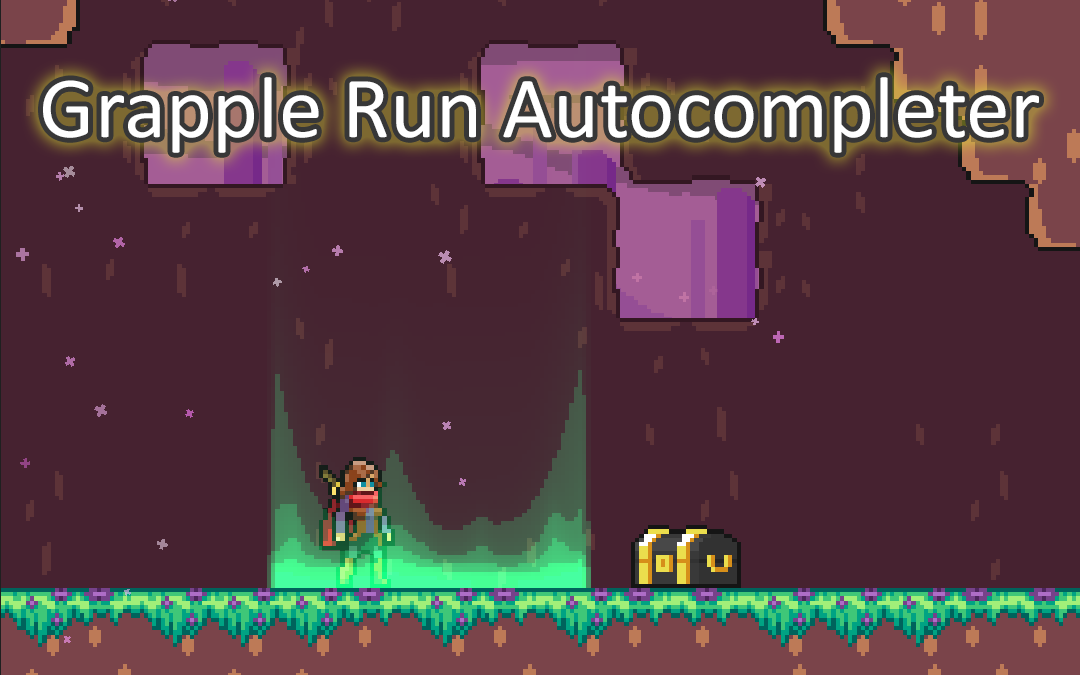
<style>
.page{position:relative;width:1080px;height:675px;background:#462230}
.page>*{position:absolute;margin:0}
.t1{font:88px "Calibri";color:#ffffff}
</style>
<div class="page">
<p class="t1" style="left:43px;top:77px;width:996px;height:76px">Grapple Run Autocompleter</p>
</div>
